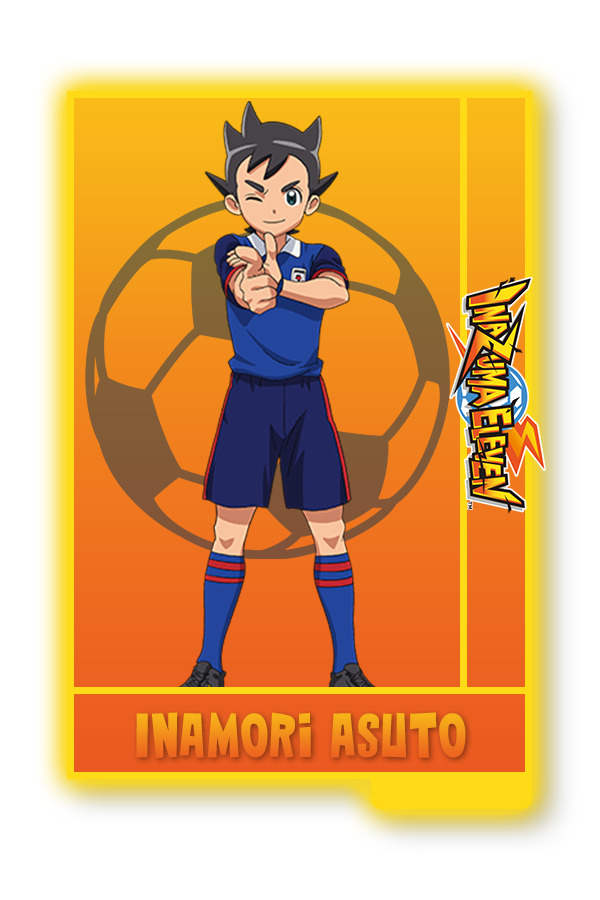
<style>
.page{position:relative;width:600px;height:900px;background:#ffffff}
.page>*{position:absolute;margin:0}
.t1{font:65.2px "TTG-Bold"}
</style>
<div class="page">
<p class="t1" style="left:136px;top:712px;width:330px;height:46px">Inamori Asuto</p>
</div>
